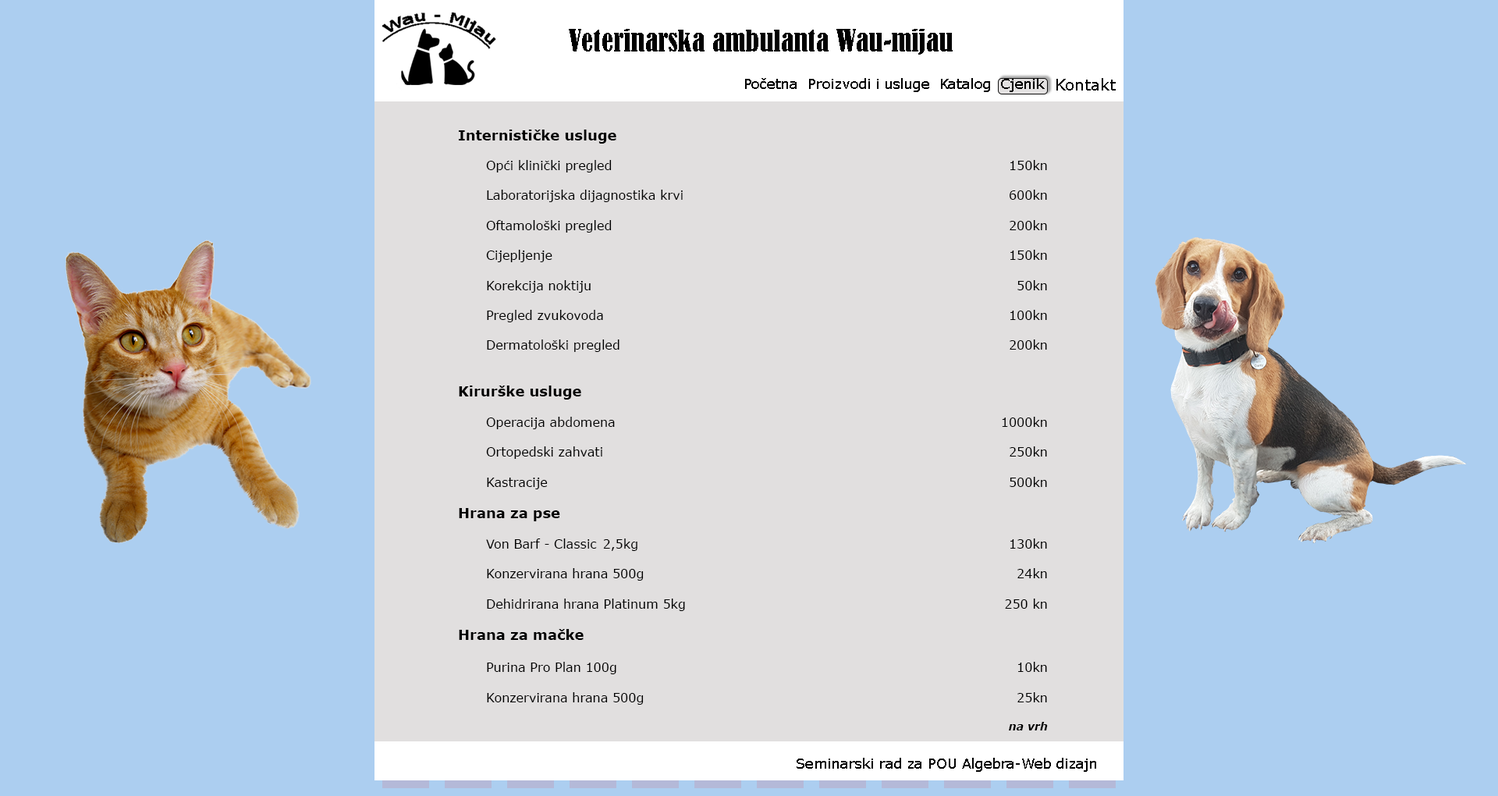
<style>
.page{position:relative;width:1498px;height:796px;background:#accef0}
.page>*{position:absolute;margin:0}
.t1{font:28.1px "BernardMT-Condensed";color:#000000}
.t2{font:14px "Verdana";color:#000000}
.t3{font:15.6px "Verdana";color:#000000}
.t4{font:12.5px "Verdana";color:#000000}
.t5{font:14px "Verdana-Bold";color:#000000}
.t6{font:10.9px "Verdana-BoldItalic";color:#000000}
</style>
<div class="page">
<p class="t1" style="left:569px;top:29px;width:384px;height:26px">Veterinarska ambulanta Wau-mijau</p>
<p class="t2" style="left:745px;top:78px;width:52px;height:11px">Početna</p>
<p class="t2" style="left:809px;top:78px;width:120px;height:14px">Proizvodi i usluge</p>
<p class="t2" style="left:941px;top:78px;width:49px;height:14px">Katalog</p>
<p class="t2" style="left:1001px;top:78px;width:44px;height:14px">Cjenik</p>
<p class="t3" style="left:1057px;top:78px;width:59px;height:13px">Kontakt</p>
<p class="t4" style="left:459px;top:130px;width:589px;height:600px"><span class="t5">Internističke usluge<br></span><br> Opći klinički pregled      150kn<br><br> Laboratorijska dijagnostika krvi 600kn<br><br> Oftamološki pregled 200kn<br> <br> Cijepljenje  150kn<br><br> Korekcija noktiju 50kn<br><br> Pregled zvukovoda 100kn<br><br> Dermatološki pregled   200kn<br> <br><br><span class="t5">Kirurške usluge<br></span><br> Operacija abdomena   1000kn<br><br> Ortopedski zahvati 250kn<br><br> Kastracije 500kn<br><br><span class="t5">Hrana za pse<br></span><br> Von Barf - Classic  2,5kg 130kn<br><br> Konzervirana hrana 500g 24kn<br><br> Dehidrirana hrana Platinum 5kg 250 kn<br><br><span class="t5">Hrana za mačke <br><br></span> Purina Pro Plan 100g 10kn<br><br> Konzervirana hrana 500g  25kn<br><br><span class="t6">na vrh<br></span><br> Dehidrat 2,5kg 200kn</p>
<p class="t2" style="left:797px;top:758px;width:299px;height:14px">Seminarski rad za POU Algebra-Web dizajn</p>
</div>
